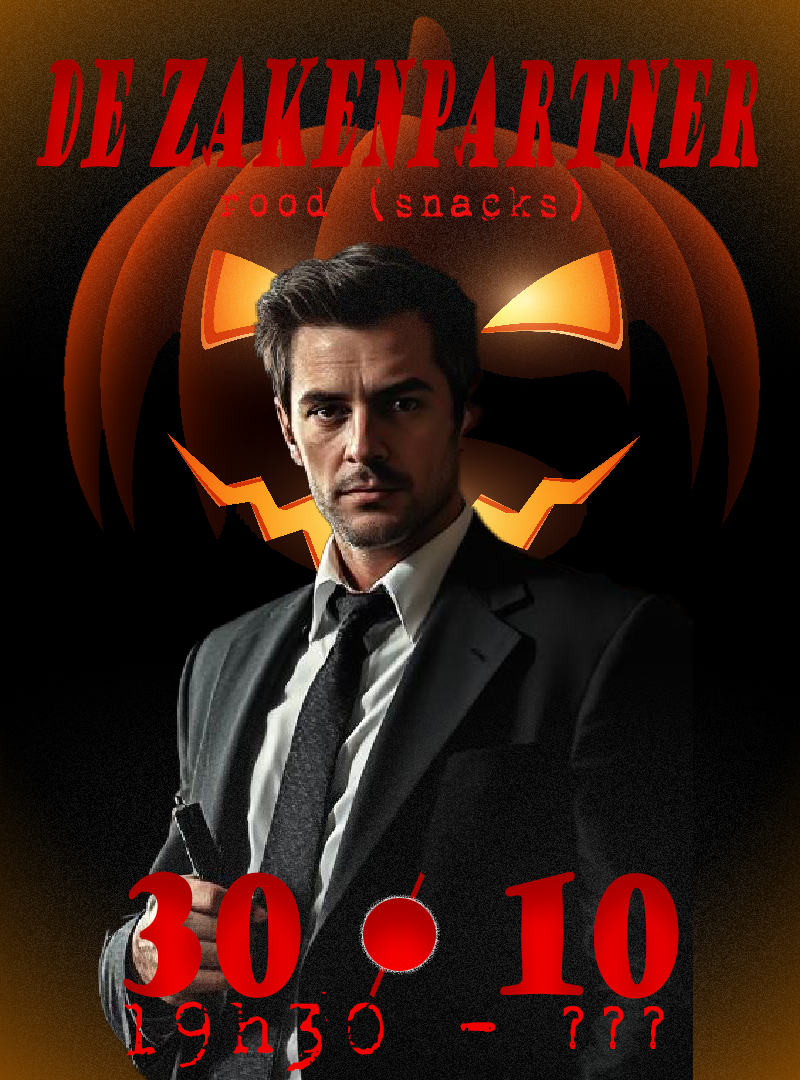
<style>
.page{position:relative;width:800px;height:1080px}
.page>*{position:absolute;margin:0}
.t1{font:145.6px "GoudyStout";color:#c60000;scale:0.28 1}
.t2{font:50.7px "1942report";color:#e90000;scale:0.88 1}
.t3{font:160.7px "GoudyStout";scale:0.71 1}
.t4{font:86.7px "1942report";color:#f40000}
.t5{font:72.7px "1942report";color:#f40000}
</style>
<div class="page">
<p class="t1" style="left:36px;top:55px;width:722px;height:116px">de zakenpartner</p>
<p class="t2" style="left:220px;top:177px;width:362px;height:45px">rood (snacks)</p>
<p class="t3" style="left:123px;top:871px;width:556px;height:128px">30 / 10</p>
<p class="t4" style="left:124px;top:992px;width:540px;height:79px">19h30 -<span class="t5"> ???</span></p>
</div>
